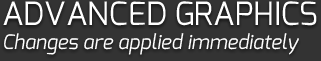
<style>
.page{position:relative;width:321px;height:61px;background:#333333}
.page>*{position:absolute;margin:0}
.t1{font:20px "Exo-Italic";color:#ffffff}
.t2{font:32px "Exo-Regular";color:#ffffff;text-transform:uppercase}
</style>
<div class="page">
<p class="t1" style="left:3px;top:1px;width:314px;height:54px"><span class="t2">Advanced Graphics<br></span>Changes are applied immediately</p>
</div>
